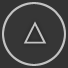
<style>
.page{position:relative;width:68px;height:68px;background:#363636}
.page>*{position:absolute;margin:0}
.t1{font:30px "NanumSquareR";color:#c3c3c3}
</style>
<div class="page">
<p class="t1" style="left:23px;top:21px;width:24px;height:23px">△</p>
</div>
